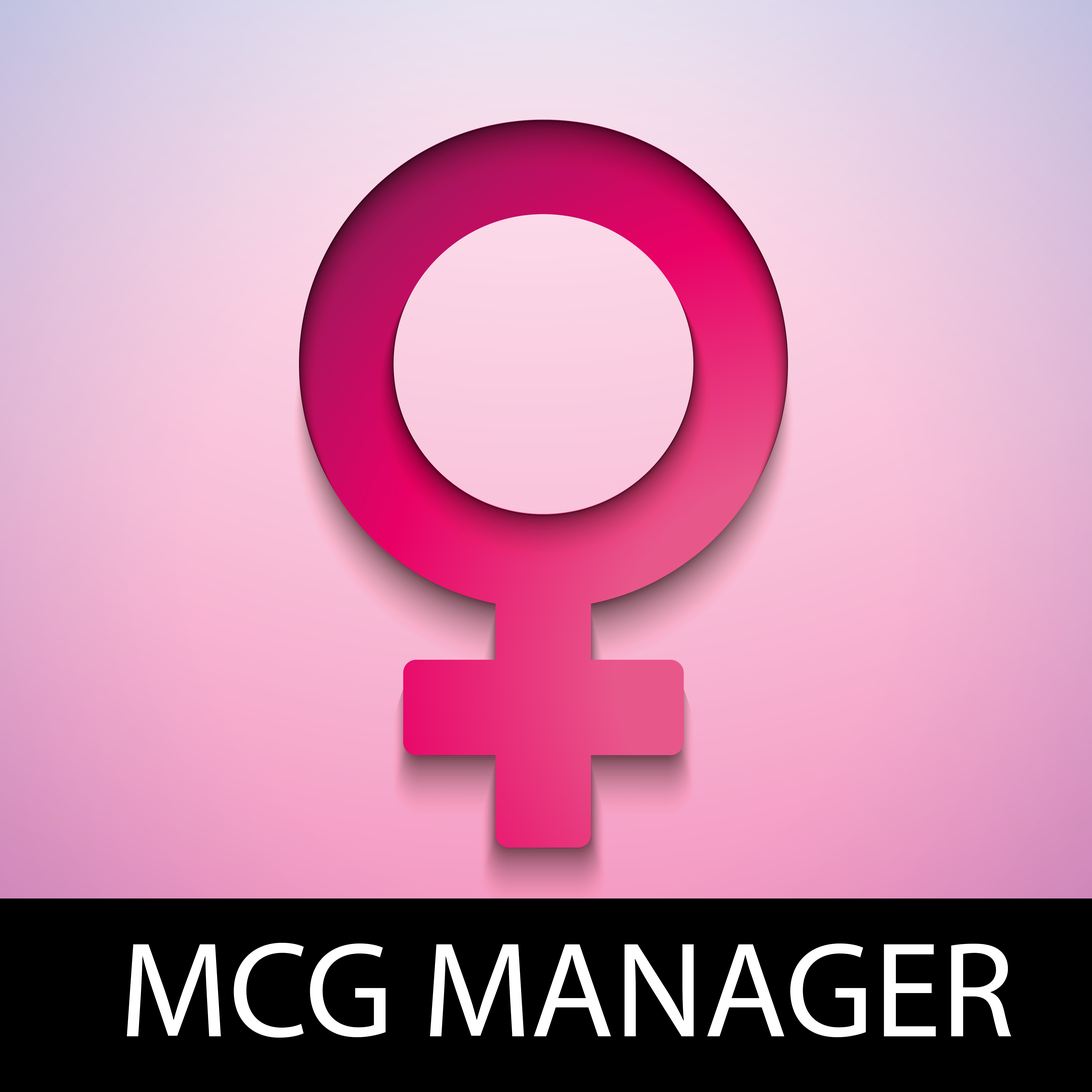
<style>
.page{position:relative;width:1092px;height:1092px}
.page>*{position:absolute;margin:0}
.t1{font:136.5px "MyriadPro-Regular";color:#ffffff}
</style>
<div class="page">
<p class="t1" style="left:127px;top:943px;width:884px;height:95px">MCG MANAGER</p>
</div>
